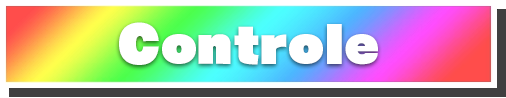
<style>
.page{position:relative;width:506px;height:98px}
.page>*{position:absolute;margin:0}
.t1{font:48px "RaglanPunchStd-UB";letter-spacing:0.029em;color:#ffffff}
</style>
<div class="page">
<p class="t1" style="left:119px;top:22px;width:259px;height:43px">Controle</p>
</div>
